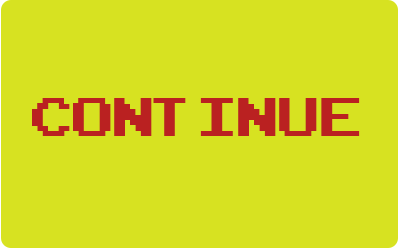
<style>
.page{position:relative;width:400px;height:250px;background:#d7e221}
.page>*{position:absolute;margin:0}
.t1{font:75px "ArcadeClassic";color:#ba2121}
</style>
<div class="page">
<p class="t1" style="left:32px;top:98px;width:328px;height:38px">continue</p>
</div>
